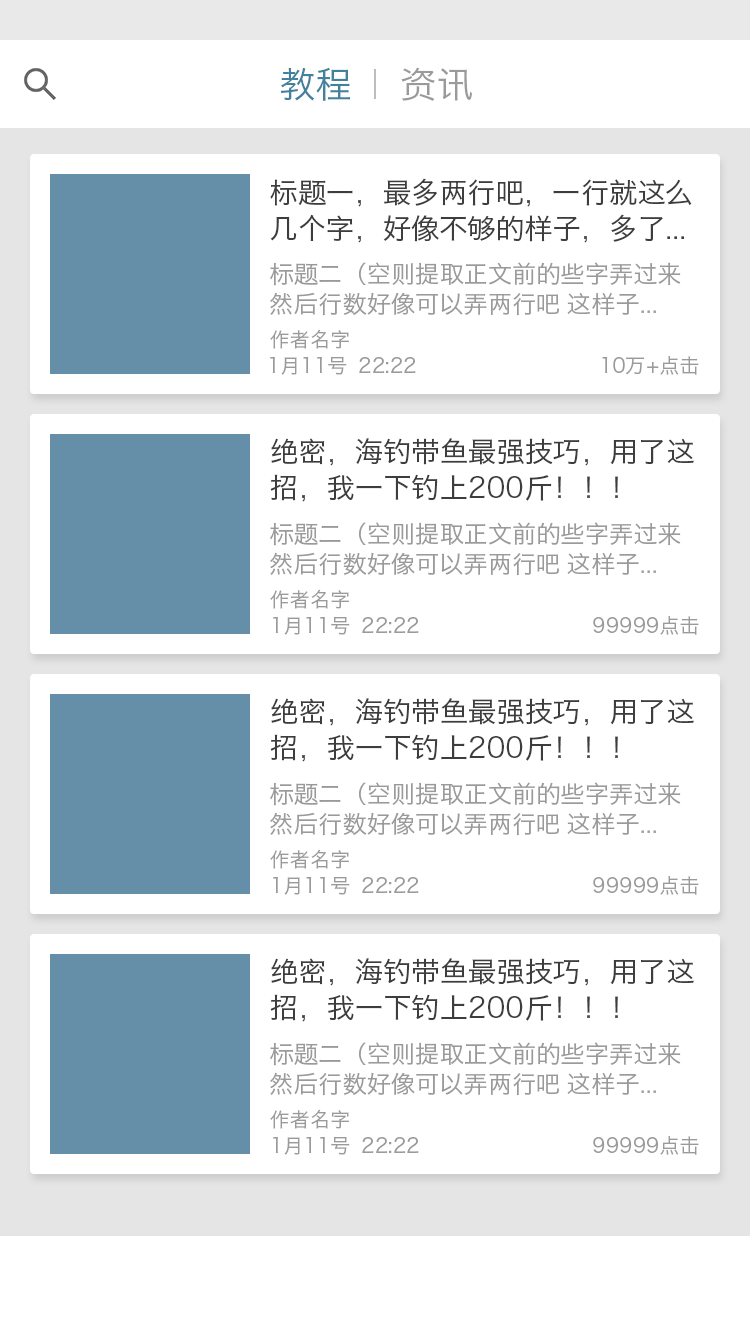
<style>
.page{position:relative;width:750px;height:1334px;background:#ffffff}
.page>*{position:absolute;margin:0}
.t1{font:36px "HiraginoSansGB-W3";color:#42819d}
.t2{font:36px "HiraginoSansGB-W3";color:#9a9a9a}
.t3{font:28px/36px "HiraginoSansGB-W3";color:#3d3d3d}
.t4{font:24px/30px "HiraginoSansGB-W3";color:#9a9a9a}
.t5{font:20px "HiraginoSansGB-W3";color:#9a9a9a}
</style>
<div class="page">
<p class="t1" style="left:281px;top:67px;width:70px;height:34px">教程</p>
<p class="t2" style="left:401px;top:67px;width:71px;height:34px">资讯</p>
<p class="t3" style="left:270px;top:178px;width:422px;height:65px">标题一，最多两行吧，一行就这么<br>几个字，好像不够的样子，多了...</p>
<p class="t4" style="left:270px;top:262px;width:411px;height:54px">标题二（空则提取正文前的些字弄过来<br>然后行数好像可以弄两行吧 这样子...</p>
<p class="t5" style="left:270px;top:329px;width:79px;height:20px">作者名字</p>
<p class="t5" style="left:270px;top:356px;width:146px;height:19px">1月11号  22:22</p>
<p class="t5" style="left:602px;top:356px;width:97px;height:19px">10万+点击</p>
<p class="t3" style="left:270px;top:438px;width:424px;height:64px">绝密，海钓带鱼最强技巧，用了这<br>招，我一下钓上200斤！！！</p>
<p class="t4" style="left:270px;top:522px;width:411px;height:54px">标题二（空则提取正文前的些字弄过来<br>然后行数好像可以弄两行吧 这样子...</p>
<p class="t5" style="left:270px;top:589px;width:79px;height:20px">作者名字</p>
<p class="t5" style="left:273px;top:616px;width:146px;height:19px">1月11号  22:22</p>
<p class="t5" style="left:593px;top:616px;width:106px;height:19px">99999点击</p>
</div>
